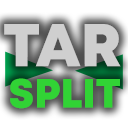
<style>
.page{position:relative;width:128px;height:128px}
.page>*{position:absolute;margin:0}
.t1{font:60.3px "Mont-HeavyDEMO";color:#cfcfcf}
.t2{font:40.8px "Mont-HeavyDEMO";color:#31d335}
</style>
<div class="page">
<p class="t1" style="left:4px;top:24px;width:117px;height:43px">TAR</p>
<p class="t2" style="left:10px;top:78px;width:110px;height:31px">SPLIT</p>
</div>
